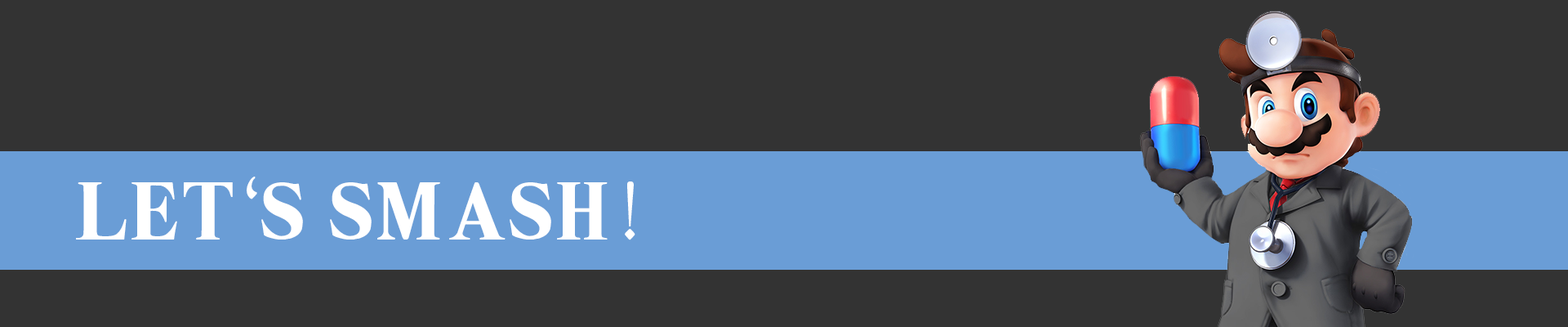
<style>
.page{position:relative;width:1568px;height:327px;background:#333333}
.page>*{position:absolute;margin:0}
.t1{font:81.7px "SuperSmash4.1";color:#ffffff}
</style>
<div class="page">
<p class="t1" style="left:76px;top:176px;width:559px;height:64px">Let‘s Smash!</p>
</div>
